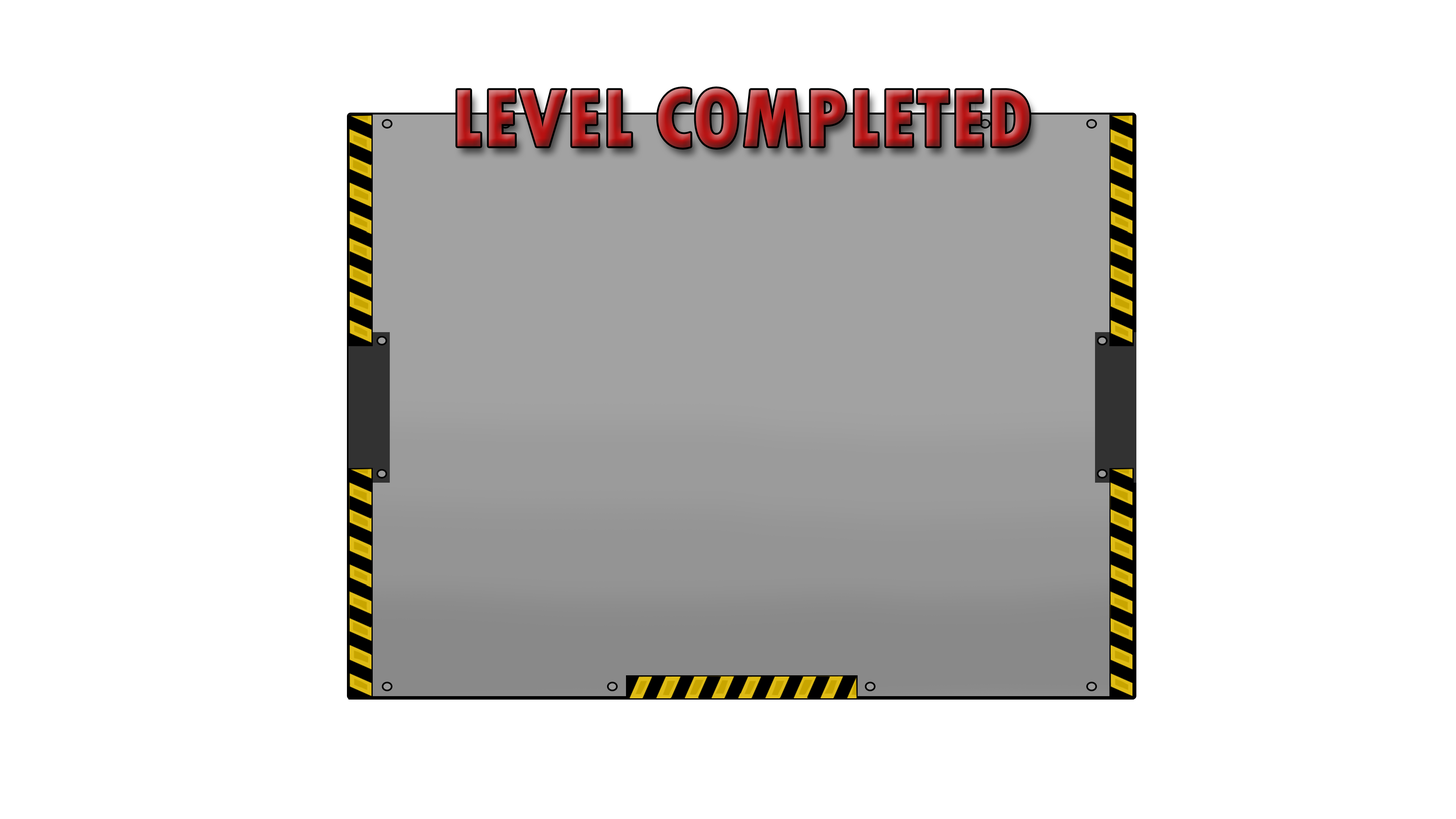
<style>
.page{position:relative;width:1456px;height:819px;background:#ffffff}
.page>*{position:absolute;margin:0}
.t1{font:86.1px "TwCenMT-CondensedExtraBold"}
</style>
<div class="page">
<p class="t1" style="left:457px;top:88px;width:572px;height:60px">LEVEL COMPLETED</p>
</div>
